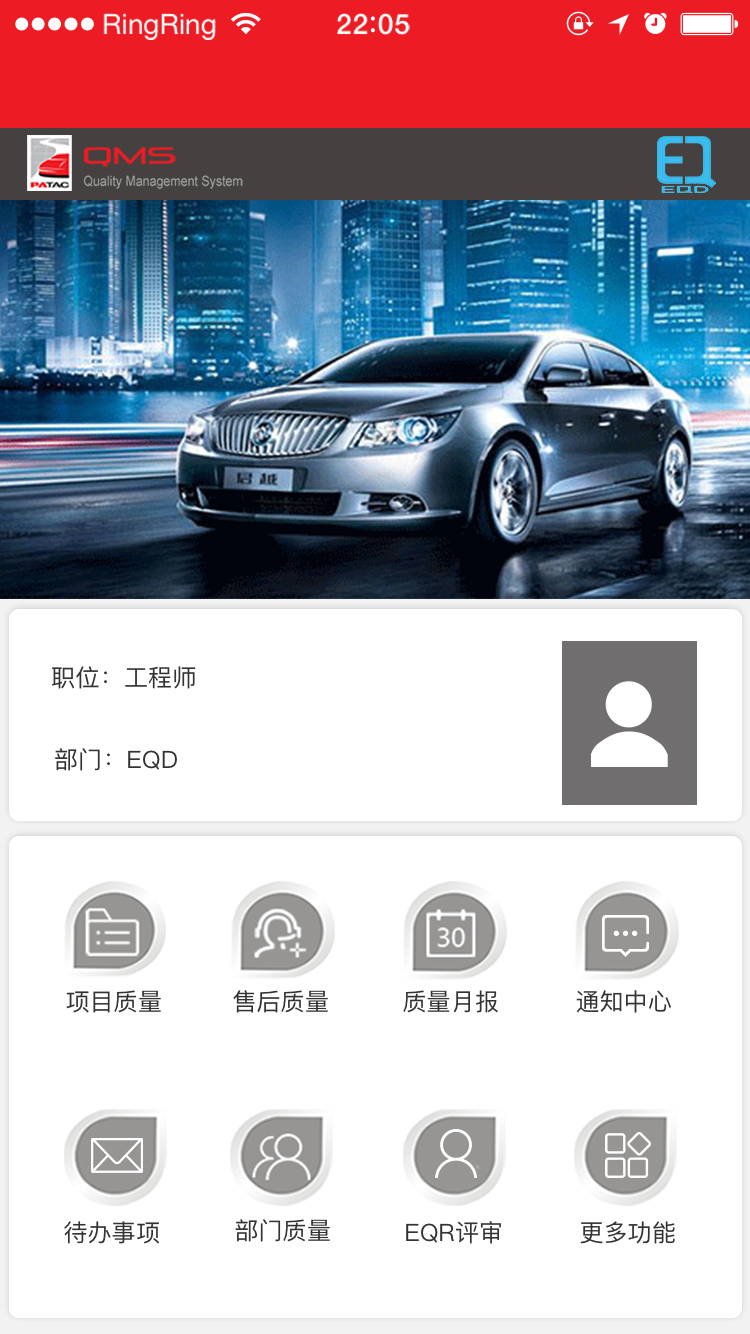
<style>
.page{position:relative;width:750px;height:1334px;background:#ffffff}
.page>*{position:absolute;margin:0}
.t1{font:28.1px "HelveticaNeue";color:#ffffff}
.t2{font:28.1px "HelveticaNeue-Medium";letter-spacing:0.03em;color:#ffffff}
.t3{font:24px "PingFangSC-Regular";letter-spacing:0.01em;color:#333333}
</style>
<div class="page">
<p class="t1" style="left:103px;top:13px;width:113px;height:27px">RingRing</p>
<p class="t2" style="left:337px;top:13px;width:73px;height:22px">22 05</p>
<p class="t3" style="left:52px;top:666px;width:144px;height:23px">职位：工程师</p>
<p class="t3" style="left:55px;top:748px;width:122px;height:23px">部门：EQD</p>
<p class="t3" style="left:66px;top:990px;width:95px;height:23px">项目质量</p>
<p class="t3" style="left:233px;top:990px;width:95px;height:23px">售后质量</p>
<p class="t3" style="left:403px;top:990px;width:95px;height:23px">质量月报</p>
<p class="t3" style="left:576px;top:990px;width:95px;height:23px">通知中心</p>
<p class="t3" style="left:64px;top:1221px;width:96px;height:23px">待办事项</p>
<p class="t3" style="left:235px;top:1219px;width:95px;height:23px">部门质量</p>
<p class="t3" style="left:406px;top:1221px;width:95px;height:23px">EQR评审</p>
<p class="t3" style="left:580px;top:1221px;width:95px;height:23px">更多功能</p>
</div>
